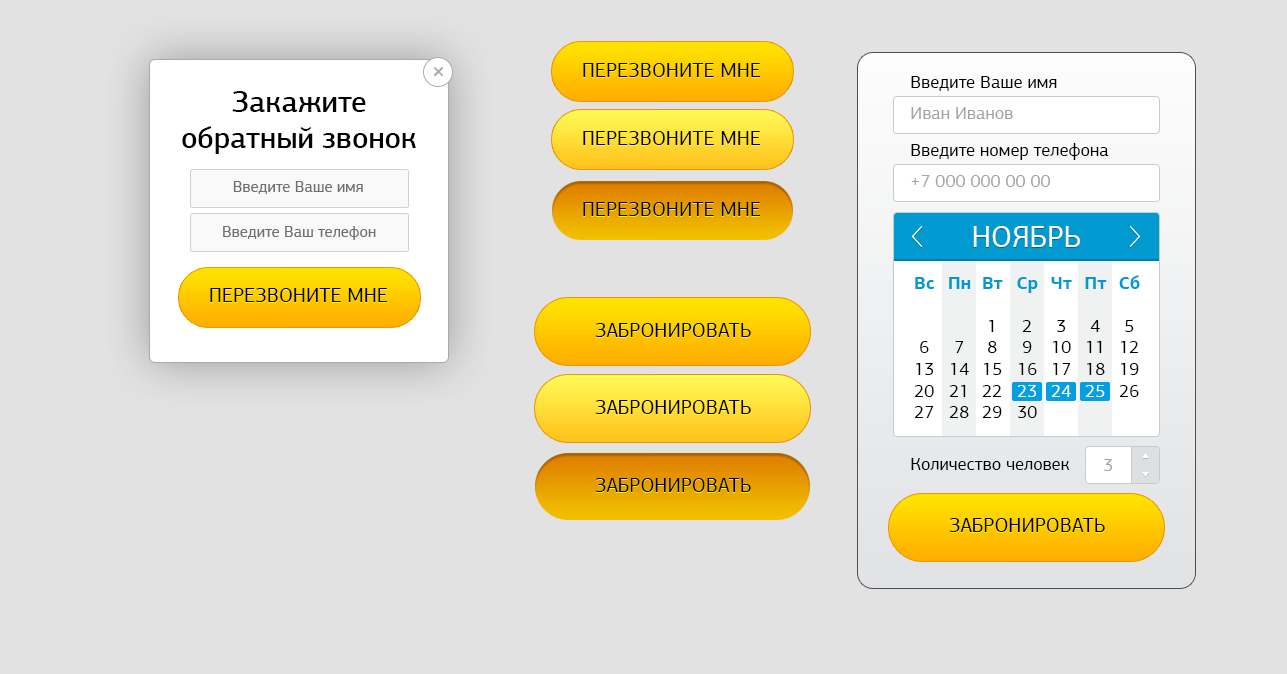
<style>
.page{position:relative;width:1287px;height:674px;background:#e2e2e2}
.page>*{position:absolute;margin:0}
.t1{font:20px "PFAgoraSansPro-Regular";color:#000000;text-transform:uppercase}
.t2{font:18px "PFAgoraSansPro-Regular";color:#000000}
.t3{font:30px "PFAgoraSansPro-Medium";color:#010101}
.t4{font:18px "PFAgoraSansPro-Regular";color:#a3a3a3}
.t5{font:16px "PFAgoraSansPro-Regular";color:#6f6f6f}
.t6{font:30px "PFAgoraSansPro-Regular";color:#ffffff;text-transform:uppercase}
.t7{font:18px "PFAgoraSansPro-Bold";color:#009ad0}
.t8{font:18px "PFAgoraSansPro-Regular";color:#ffffff}
</style>
<div class="page">
<p class="t1" style="left:583px;top:63px;width:178px;height:14px">перезвоните мне</p>
<p class="t2" style="left:911px;top:76px;width:146px;height:15px">Введите Ваше имя</p>
<p class="t3" style="left:182px;top:91px;width:234px;height:63px;text-align:center">Закажите обратный звонок</p>
<p class="t4" style="left:911px;top:107px;width:102px;height:12px">Иван Иванов</p>
<p class="t1" style="left:583px;top:131px;width:178px;height:14px">перезвоните мне</p>
<p class="t2" style="left:911px;top:143px;width:198px;height:17px">Введите номер телефона</p>
<p class="t5" style="left:233px;top:181px;width:130px;height:13px">Введите Ваше имя</p>
<p class="t4" style="left:911px;top:175px;width:139px;height:12px">+7 000 000 00 00</p>
<p class="t1" style="left:583px;top:202px;width:178px;height:14px">перезвоните мне</p>
<p class="t5" style="left:223px;top:226px;width:153px;height:14px">Введите Ваш телефон</p>
<p class="t6" style="left:973px;top:226px;width:107px;height:21px">Ноябрь</p>
<p class="t2" style="left:914px;top:277px;width:21px;height:141px;text-align:center"><span class="t7">Вс<br></span><br><br>6<br>13<br>20<br>27</p>
<p class="t2" style="left:949px;top:277px;width:22px;height:141px;text-align:center"><span class="t7">Пн<br></span><br><br>7<br>14<br>21<br>28</p>
<p class="t2" style="left:982px;top:277px;width:21px;height:141px;text-align:center"><span class="t7">Вт<br></span><br>1<br>8<br>15<br>22<br>29</p>
<p class="t2" style="left:1017px;top:277px;width:21px;height:141px;text-align:center"><span class="t7">Ср<br></span><br>2<br>9<br>16<br><span class="t8">23<br></span>30</p>
<p class="t2" style="left:1051px;top:277px;width:21px;height:120px;text-align:center"><span class="t7">Чт<br></span><br>3<br>10<br>17<br><span class="t8">24</span></p>
<p class="t2" style="left:1085px;top:277px;width:22px;height:120px;text-align:center"><span class="t7">Пт<br></span><br>4<br>11<br>18<br><span class="t8">25</span></p>
<p class="t2" style="left:1119px;top:275px;width:21px;height:122px;text-align:center"><span class="t7">Сб<br></span><br>5<br>12<br>19<br>26</p>
<p class="t1" style="left:210px;top:288px;width:178px;height:14px">перезвоните мне</p>
<p class="t1" style="left:595px;top:323px;width:156px;height:14px">Забронировать</p>
<p class="t1" style="left:595px;top:400px;width:156px;height:14px">Забронировать</p>
<p class="t2" style="left:911px;top:458px;width:159px;height:12px">Количество человек</p>
<p class="t4" style="left:1104px;top:459px;width:9px;height:12px">3</p>
<p class="t1" style="left:595px;top:478px;width:156px;height:14px">Забронировать</p>
<p class="t1" style="left:949px;top:518px;width:156px;height:14px">Забронировать</p>
</div>
